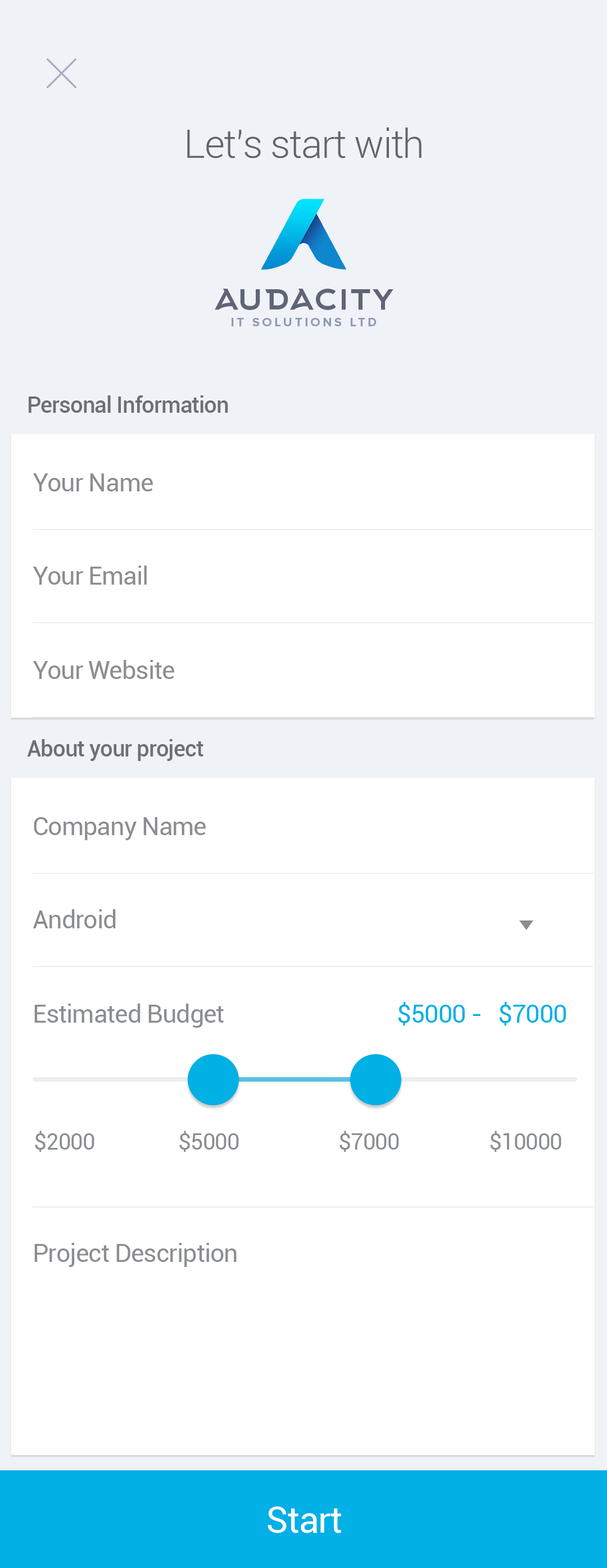
<style>
.page{position:relative;width:607px;height:1568px;background:#ffffff}
.page>*{position:absolute;margin:0}
.t1{font:39.3px "Roboto-Light";letter-spacing:-0.025em;color:#616468}
.t2{font:38.8px "Arkhip";letter-spacing:-0.025em;color:#5f6576}
.t3{font:12.5px "ProximaNova-Bold";letter-spacing:0.2em;color:#9099b2;text-transform:uppercase}
.t4{font:22.5px "Roboto-Medium";letter-spacing:-0.025em;color:#6b7077}
.t5{font:25.3px "Roboto-Regular";letter-spacing:-0.025em;color:#8a8d91}
.t6{font:25.3px "Roboto-Regular";letter-spacing:-0.025em;color:#01b0e5}
.t7{font:22.5px "Roboto-Regular";letter-spacing:-0.025em;color:#8a8d91}
.t8{font:36.5px "Roboto-Regular";letter-spacing:-0.025em;color:#ffffff}
</style>
<div class="page">
<p class="t1" style="left:187px;top:127px;width:234px;height:31px">Let’s start with</p>
<p class="t2" style="left:215px;top:289px;width:178px;height:21px">audacity</p>
<p class="t3" style="left:231px;top:318px;width:145px;height:8px">it solutions ltd</p>
<p class="t4" style="left:29px;top:395px;width:199px;height:18px">Personal Information</p>
<p class="t5" style="left:33px;top:473px;width:120px;height:18px">Your Name</p>
<p class="t5" style="left:33px;top:566px;width:114px;height:19px">Your Email</p>
<p class="t5" style="left:33px;top:660px;width:141px;height:19px">Your Website</p>
<p class="t4" style="left:27px;top:739px;width:176px;height:22px">About your project</p>
<p class="t5" style="left:34px;top:817px;width:172px;height:23px">Company Name</p>
<p class="t5" style="left:33px;top:909px;width:83px;height:19px">Android</p>
<p class="t5" style="left:34px;top:1002px;width:532px;height:26px">Estimated Budget         <span class="t6">$5000 -  $7000</span></p>
<p class="t7" style="left:35px;top:1131px;width:59px;height:21px">$2000</p>
<p class="t7" style="left:179px;top:1131px;width:60px;height:21px">$5000</p>
<p class="t7" style="left:339px;top:1131px;width:60px;height:21px">$7000</p>
<p class="t7" style="left:490px;top:1131px;width:71px;height:21px">$10000</p>
<p class="t5" style="left:34px;top:1243px;width:202px;height:24px">Project Description</p>
<p class="t8" style="left:267px;top:1506px;width:74px;height:27px">Start</p>
</div>
